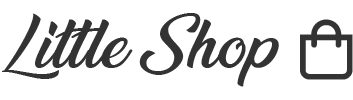
<style>
.page{position:relative;width:353px;height:100px;background:#ffffff}
.page>*{position:absolute;margin:0}
.t1{font:60px "AnandaBlack";color:#333333}
</style>
<div class="page">
<p class="t1" style="left:2px;top:13px;width:277px;height:74px">Little Shop</p>
</div>
